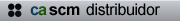
<style>
.page{position:relative;width:180px;height:21px}
.page>*{position:absolute;margin:0}
.t1{font:16px "Arial-BoldMT";letter-spacing:-0.025em;color:#000000}
.t2{font:16px "Arial-BoldMT";letter-spacing:-0.05em;color:#0e4267}
.t3{font:16px "Arial-BoldMT";letter-spacing:-0.05em;color:#205b10}
.t4{font:16px "ArialMT";letter-spacing:-0.025em;color:#000000}
</style>
<div class="page">
<p class="t1" style="left:30px;top:6px;width:50px;height:10px"><span class="t2">c</span><span class="t3">a </span>scm</p>
<p class="t4" style="left:86px;top:3px;width:74px;height:13px">distribuidor</p>
</div>
